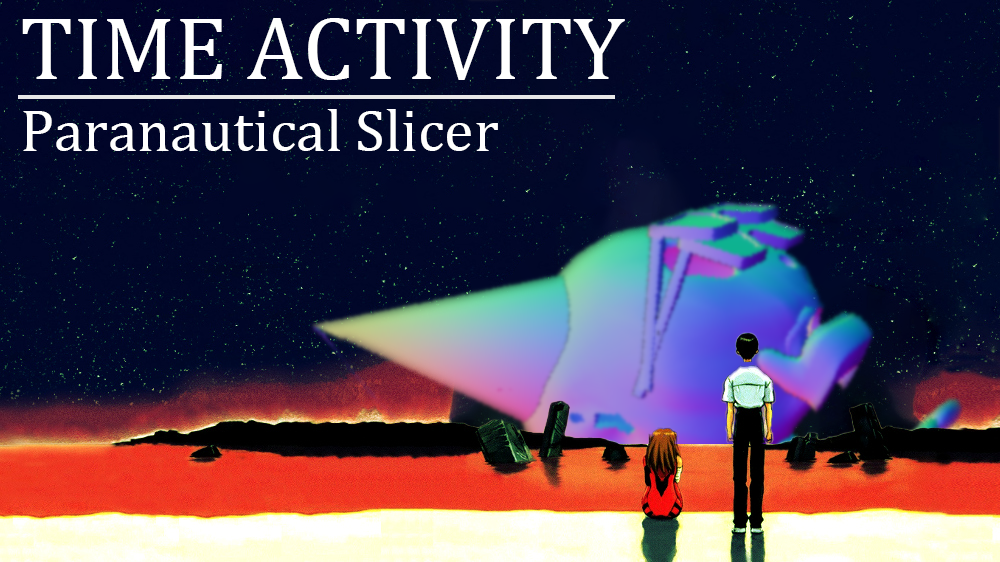
<style>
.page{position:relative;width:1000px;height:562px}
.page>*{position:absolute;margin:0}
.t1{font:60px "CambriaMath";color:#ffffff}
.t2{font:90px "CambriaMath";color:#ffffff}
</style>
<div class="page">
<p class="t1" style="left:22px;top:18px;width:603px;height:133px"><span class="t2">TIME ACTIVITY<br></span>Paranautical Slicer</p>
</div>
